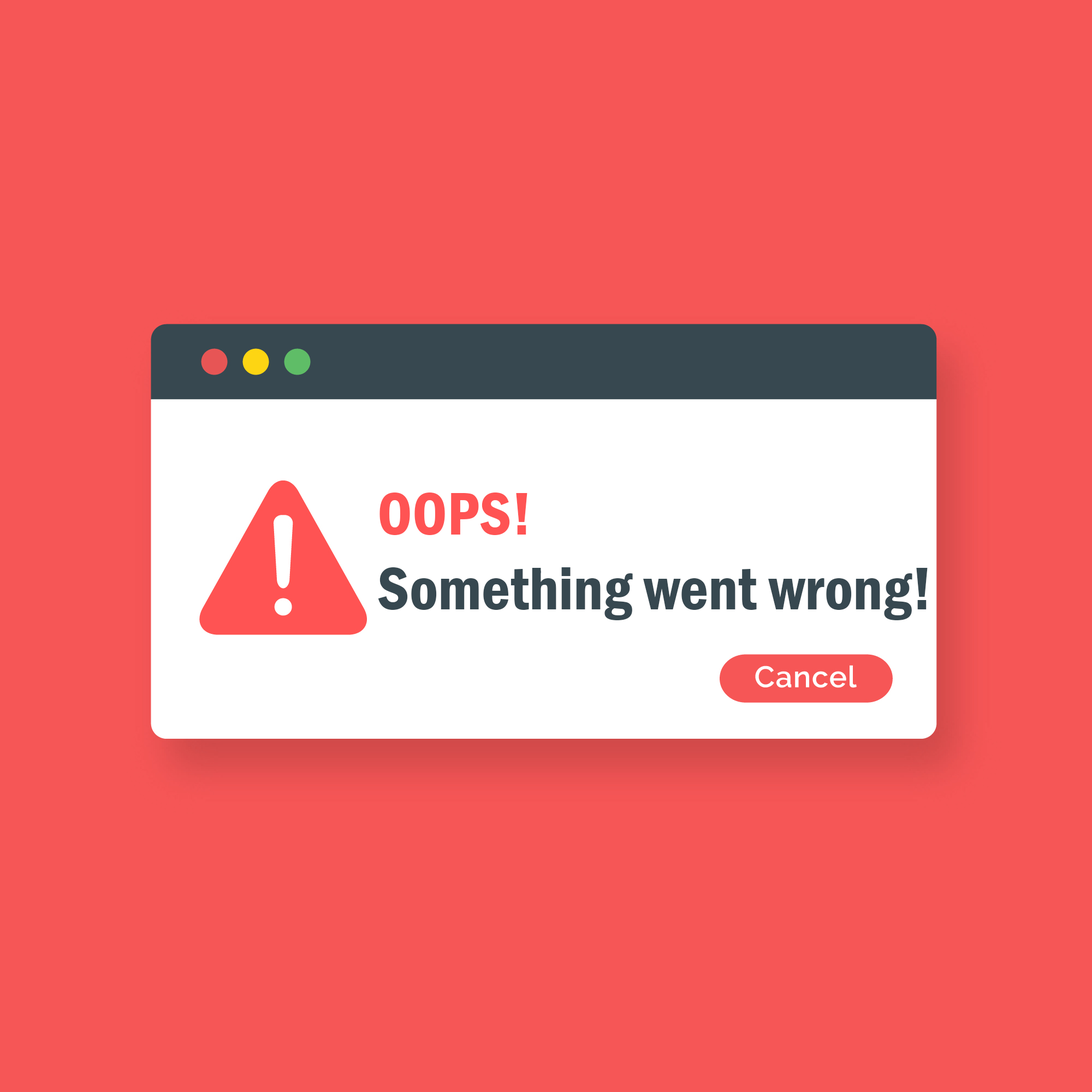
<style>
.page{position:relative;width:1092px;height:1092px;background:#f65656}
.page>*{position:absolute;margin:0}
.t1{font:62.2px "FranklinGothic-DemiCond";color:#374850}
.t2{font:62.2px "FranklinGothic-DemiCond";color:#ff5353}
</style>
<div class="page">
<p class="t1" style="left:378px;top:492px;width:550px;height:128px"><span class="t2">OOPS!<br></span>Something went wrong!</p>
</div>
